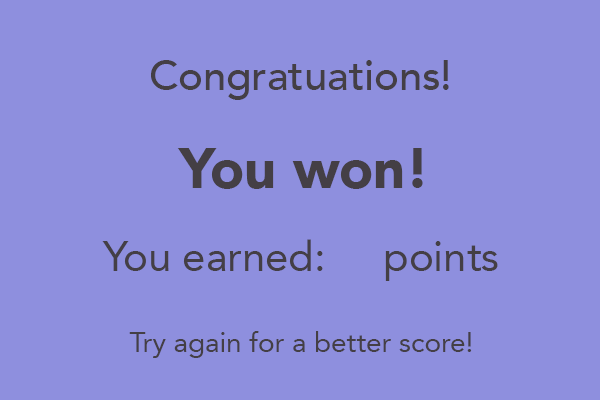
<style>
.page{position:relative;width:600px;height:400px;background:#8e8fde}
.page>*{position:absolute;margin:0}
.t1{font:41.7px "Avenir-Medium";color:#443f45}
.t2{font:55.6px "Avenir-Black";color:#443f45}
.t3{font:41.7px "Avenir-Roman";color:#443f45}
.t4{font:27.8px "Avenir-Roman";color:#443f45}
</style>
<div class="page">
<p class="t1" style="left:151px;top:60px;width:298px;height:40px">Congratuations!</p>
<p class="t2" style="left:177px;top:148px;width:246px;height:41px">You won!</p>
<p class="t3" style="left:102px;top:239px;width:396px;height:42px">You earned:     points</p>
<p class="t4" style="left:129px;top:331px;width:343px;height:27px">Try again for a better score!</p>
</div>
